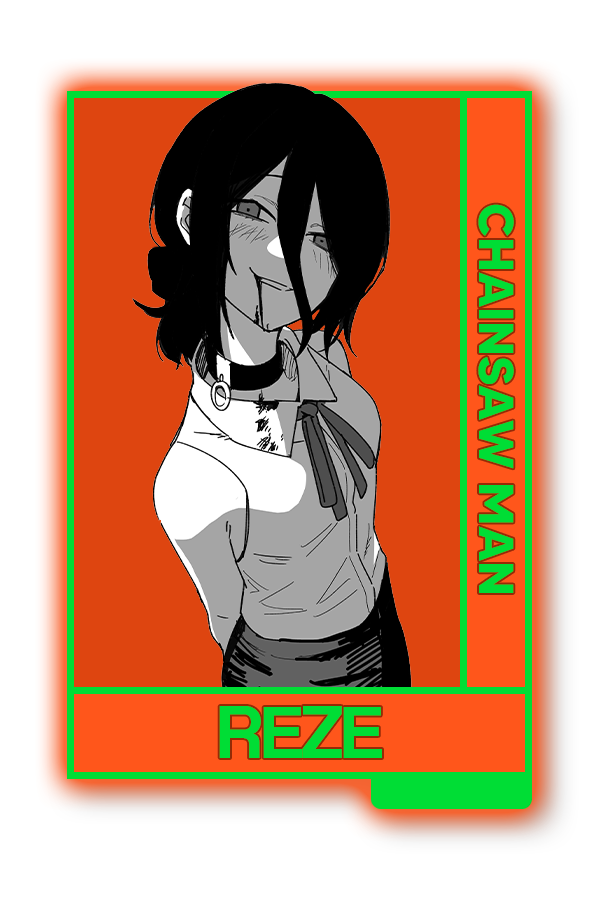
<style>
.page{position:relative;width:600px;height:900px;background:#ffffff}
.page>*{position:absolute;margin:0}
.t1{font:48.8px "MADETOMMY-Bold";color:#00dd35}
.t2{font:75.7px "CoolveticaRg-Regular";color:#00dd35}
</style>
<div class="page">
<p class="t1" style="left:478px;top:204px;width:36px;height:389px;rotate:90deg">CHAINSAW MAN</p>
<p class="t2" style="left:219px;top:706px;width:163px;height:52px">REZE</p>
</div>
